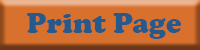
<style>
.page{position:relative;width:200px;height:50px;background:#d9712e}
.page>*{position:absolute;margin:0}
.t1{font:29.2px "CooperBlack";color:#265a8d}
</style>
<div class="page">
<p class="t1" style="left:26px;top:13px;width:155px;height:26px">Print Page</p>
</div>
